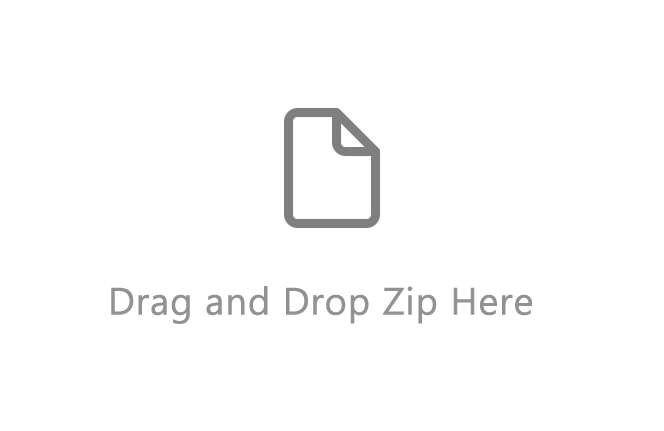
<style>
.page{position:relative;width:664px;height:431px;background:#ffffff}
.page>*{position:absolute;margin:0}
.t1{font:38px "SegoeUI";color:#929292;font-weight:bold}
</style>
<div class="page">
<p class="t1" style="left:111px;top:286px;width:421px;height:38px">Drag and Drop Zip Here</p>
</div>
